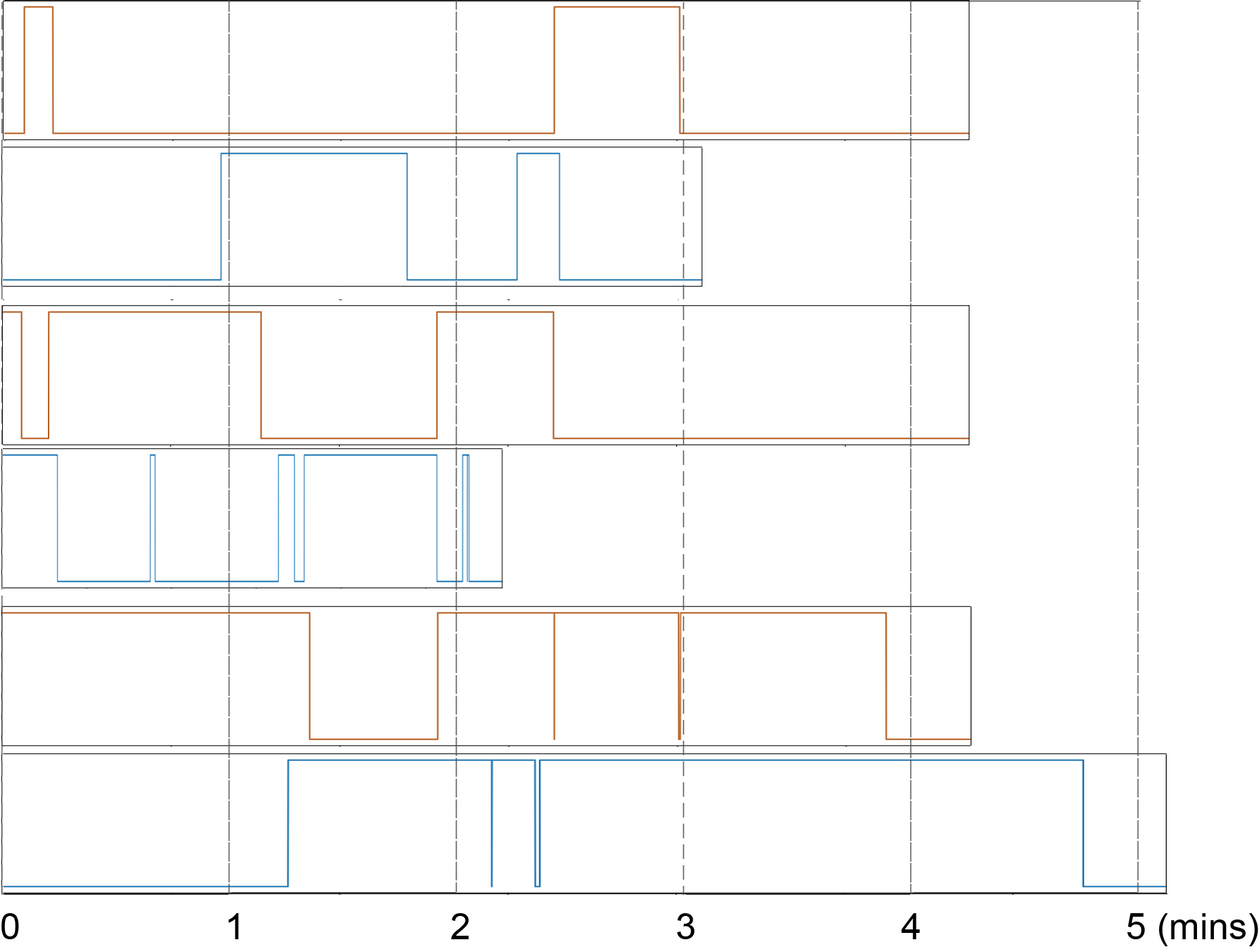
<style>
.page{position:relative;width:1259px;height:947px;background:#ffffff}
.page>*{position:absolute;margin:0}
.t1{font:36.9px "ArialMT";color:#000000}
</style>
<div class="page">
<p class="t1" style="left:1px;top:913px;width:1257px;height:33px">0                    1                    2                    3                    4                    5 (mins)</p>
</div>
